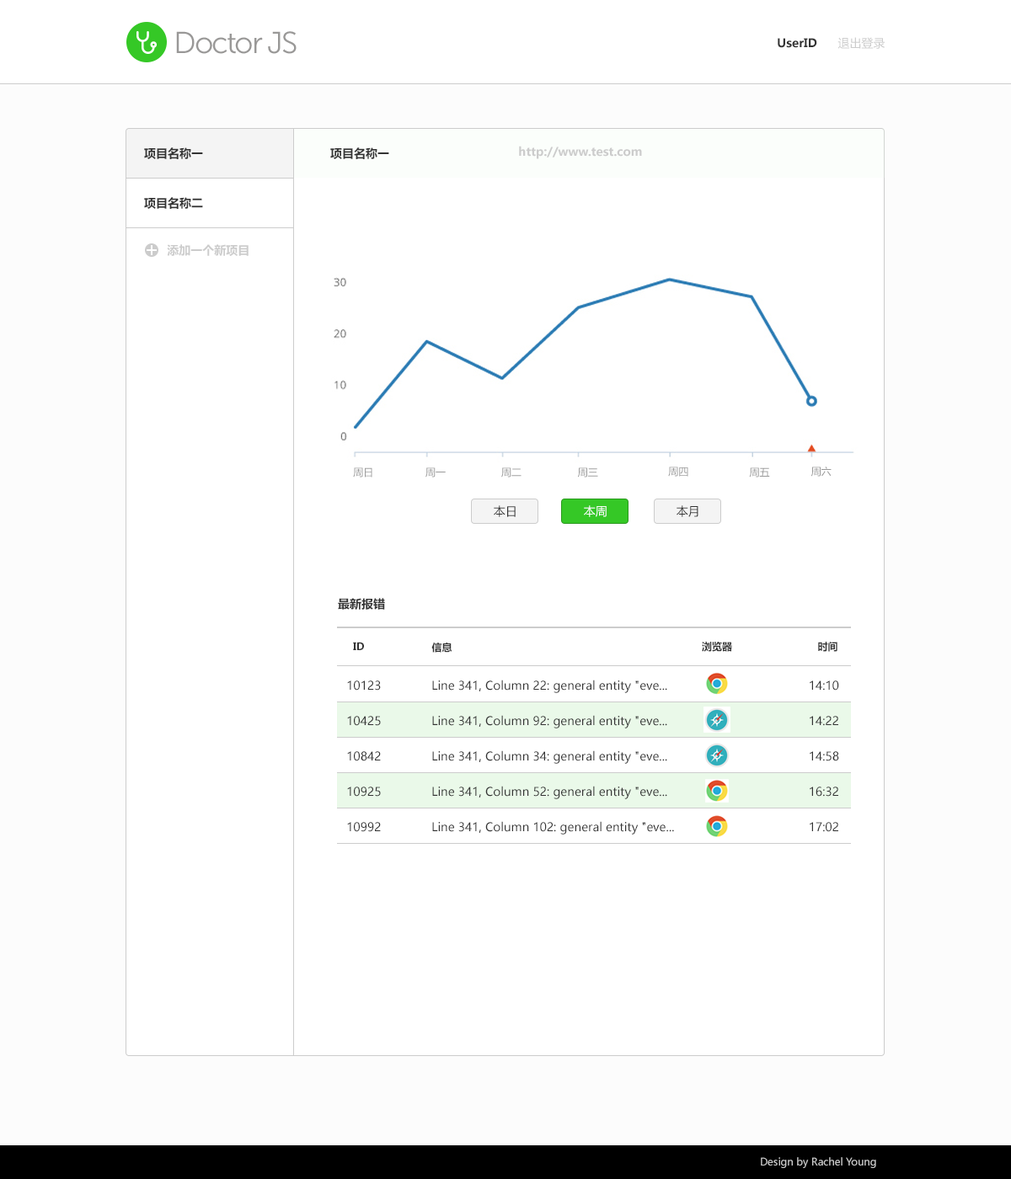
<style>
.page{position:relative;width:1011px;height:1179px;background:#ffffff}
.page>*{position:absolute;margin:0}
.t1{font:30.3px "MuseoSans-300";letter-spacing:-0.06em;color:#999897}
.t2{font:11.8px "MicrosoftYaHeiUI-Bold";color:#333333}
.t3{font:11.8px "MicrosoftYaHeiUI";color:#cccccc}
.t4{font:11.8px "MicrosoftYaHeiUI-Bold";color:#cccccc}
.t5{font:10.1px "MicrosoftYaHeiUI";color:#999999}
.t6{font:11.8px "MicrosoftYaHeiUI";color:#333333}
.t7{font:11.8px "MicrosoftYaHeiUI";color:#ffffff}
.t8{font:10.1px "MicrosoftYaHeiUI-Bold";color:#333333}
.t9{font:11.8px/35.4px "MicrosoftYaHeiUI";color:#333333}
.t10{font:10.1px "MicrosoftYaHeiUI";color:#cccccc}
</style>
<div class="page">
<p class="t1" style="left:176px;top:31px;width:121px;height:23px">Doctor JS</p>
<p class="t2" style="left:778px;top:38px;width:39px;height:10px">UserID</p>
<p class="t3" style="left:837px;top:37px;width:48px;height:12px">退出登录</p>
<p class="t2" style="left:144px;top:147px;width:59px;height:12px">项目名称一</p>
<p class="t2" style="left:330px;top:147px;width:59px;height:12px">项目名称一</p>
<p class="t4" style="left:519px;top:146px;width:123px;height:13px">http://www.test.com</p>
<p class="t2" style="left:144px;top:197px;width:59px;height:12px">项目名称二</p>
<p class="t4" style="left:167px;top:244px;width:82px;height:12px">添加一个新项目</p>
<p class="t5" style="left:353px;top:468px;width:19px;height:10px">周日</p>
<p class="t5" style="left:425px;top:468px;width:21px;height:10px">周一</p>
<p class="t5" style="left:501px;top:468px;width:20px;height:10px">周二</p>
<p class="t5" style="left:578px;top:468px;width:20px;height:10px">周三</p>
<p class="t5" style="left:668px;top:467px;width:20px;height:10px">周四</p>
<p class="t5" style="left:749px;top:468px;width:21px;height:10px">周五</p>
<p class="t5" style="left:811px;top:467px;width:21px;height:10px">周六</p>
<p class="t6" style="left:494px;top:505px;width:22px;height:12px">本日</p>
<p class="t7" style="left:584px;top:505px;width:23px;height:12px">本周</p>
<p class="t6" style="left:677px;top:505px;width:21px;height:12px">本月</p>
<p class="t2" style="left:338px;top:598px;width:47px;height:12px">最新报错</p>
<p class="t8" style="left:353px;top:642px;width:11px;height:8px">ID</p>
<p class="t8" style="left:702px;top:641px;width:30px;height:11px">浏览器</p>
<p class="t8" style="left:818px;top:642px;width:19px;height:10px">时间</p>
<p class="t8" style="left:431px;top:643px;width:21px;height:10px">信息</p>
<p class="t9" style="left:347px;top:681px;width:34px;height:151px">10123<br>10425<br>10842<br>10925<br>10992</p>
<p class="t9" style="left:432px;top:680px;width:242px;height:155px">Line 341, Column 22: general entity "eve...<br>Line 341, Column 92: general entity "eve...<br>Line 341, Column 34: general entity "eve...<br>Line 341, Column 52: general entity "eve...<br>Line 341, Column 102: general entity "eve...</p>
<p class="t9" style="left:810px;top:681px;width:29px;height:151px">14:10<br>14:22<br>14:58<br>16:32<br>17:02</p>
<p class="t10" style="left:761px;top:1158px;width:115px;height:11px">Design by Rachel Young</p>
</div>
